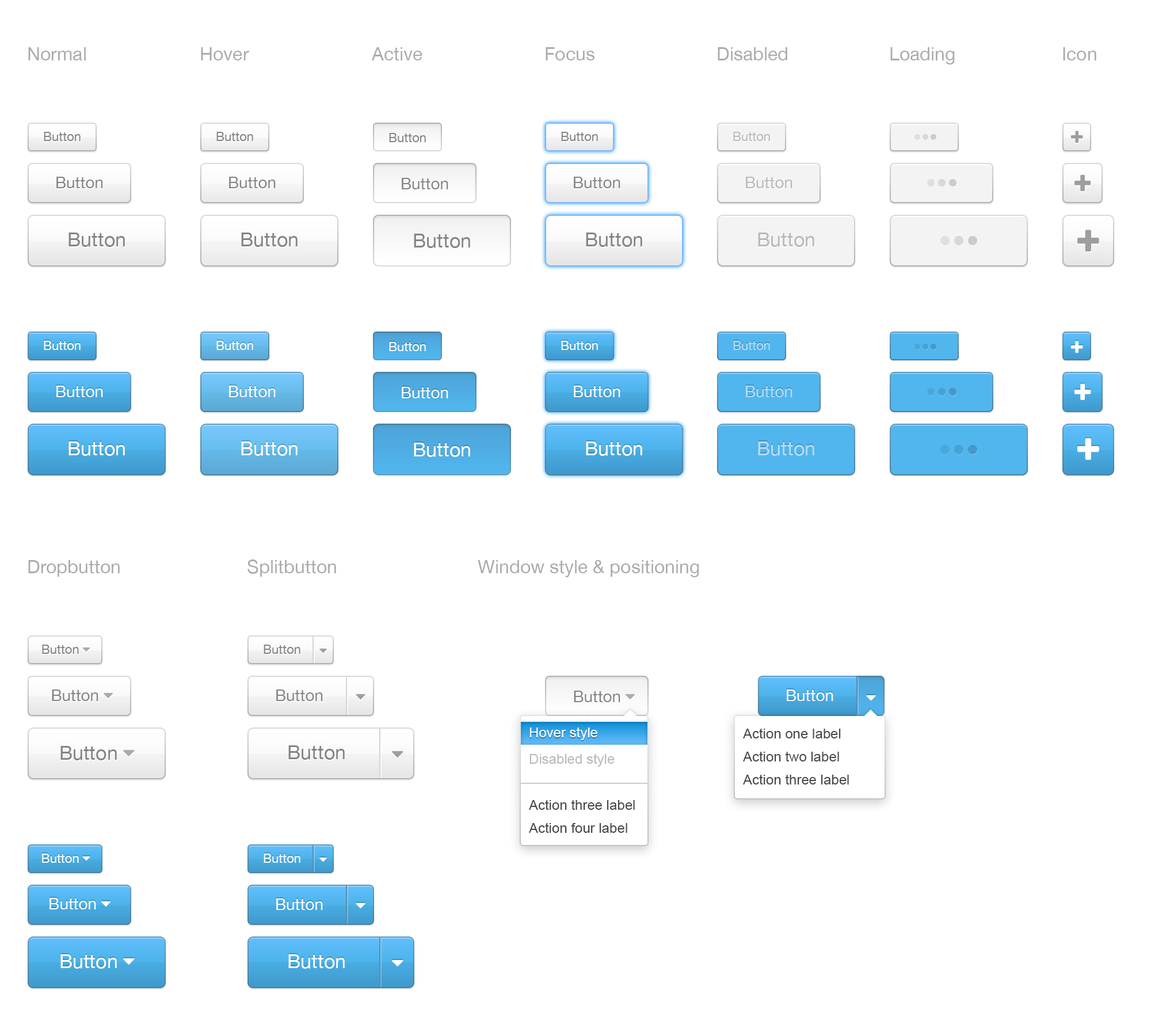
<style>
.page{position:relative;width:1151px;height:1036px;background:#ffffff}
.page>*{position:absolute;margin:0}
.t1{font:18.4px "HelveticaNeue";color:#ababab}
.t2{font:12.7px "HelveticaNeue";color:#848484}
.t3{font:12.7px "HelveticaNeue";color:#b9b9b9}
.t4{font:16.1px "HelveticaNeue";color:#848484}
.t5{font:16.1px "HelveticaNeue";color:#b9b9b9}
.t6{font:19.6px "HelveticaNeue";color:#848484}
.t7{font:19.6px "HelveticaNeue";color:#b9b9b9}
.t8{font:12.7px "HelveticaNeue";color:#ffffff}
.t9{font:12.7px "HelveticaNeue";color:#b6ddf7}
.t10{font:16.1px "HelveticaNeue";color:#ffffff}
.t11{font:16.1px "HelveticaNeue";color:#b6ddf7}
.t12{font:19.6px "HelveticaNeue";color:#ffffff}
.t13{font:19.6px "HelveticaNeue";color:#b6ddf7}
.t14{font:13.8px "ArialMT";color:#ffffff}
.t15{font:13.8px/23px "ArialMT";color:#474747}
.t16{font:13.8px/23px "ArialMT";color:#b9b9b9}
</style>
<div class="page">
<p class="t1" style="left:28px;top:47px;width:58px;height:13px">Normal</p>
<p class="t1" style="left:201px;top:47px;width:48px;height:13px">Hover</p>
<p class="t1" style="left:371px;top:47px;width:51px;height:13px">Active</p>
<p class="t1" style="left:546px;top:47px;width:49px;height:13px">Focus</p>
<p class="t1" style="left:718px;top:47px;width:69px;height:13px">Disabled</p>
<p class="t1" style="left:890px;top:47px;width:65px;height:17px">Loading</p>
<p class="t1" style="left:1063px;top:47px;width:33px;height:13px">Icon</p>
<p class="t2" style="left:44px;top:132px;width:37px;height:9px">Button</p>
<p class="t2" style="left:216px;top:132px;width:37px;height:9px">Button</p>
<p class="t2" style="left:389px;top:133px;width:37px;height:9px">Button</p>
<p class="t2" style="left:561px;top:132px;width:37px;height:9px">Button</p>
<p class="t3" style="left:733px;top:132px;width:37px;height:9px">Button</p>
<p class="t4" style="left:56px;top:177px;width:47px;height:11px">Button</p>
<p class="t4" style="left:229px;top:177px;width:47px;height:11px">Button</p>
<p class="t4" style="left:402px;top:178px;width:46px;height:11px">Button</p>
<p class="t4" style="left:574px;top:177px;width:46px;height:11px">Button</p>
<p class="t5" style="left:746px;top:177px;width:47px;height:11px">Button</p>
<p class="t6" style="left:68px;top:233px;width:57px;height:14px">Button</p>
<p class="t6" style="left:241px;top:233px;width:57px;height:14px">Button</p>
<p class="t6" style="left:414px;top:234px;width:56px;height:14px">Button</p>
<p class="t6" style="left:586px;top:233px;width:56px;height:14px">Button</p>
<p class="t7" style="left:758px;top:233px;width:56px;height:14px">Button</p>
<p class="t8" style="left:44px;top:341px;width:37px;height:9px">Button</p>
<p class="t8" style="left:216px;top:341px;width:37px;height:9px">Button</p>
<p class="t8" style="left:389px;top:342px;width:37px;height:9px">Button</p>
<p class="t8" style="left:561px;top:341px;width:37px;height:9px">Button</p>
<p class="t9" style="left:733px;top:341px;width:37px;height:9px">Button</p>
<p class="t10" style="left:56px;top:386px;width:47px;height:11px">Button</p>
<p class="t10" style="left:229px;top:386px;width:47px;height:11px">Button</p>
<p class="t10" style="left:402px;top:387px;width:46px;height:11px">Button</p>
<p class="t10" style="left:574px;top:386px;width:46px;height:11px">Button</p>
<p class="t11" style="left:746px;top:386px;width:47px;height:11px">Button</p>
<p class="t12" style="left:68px;top:441px;width:57px;height:15px">Button</p>
<p class="t12" style="left:241px;top:441px;width:57px;height:15px">Button</p>
<p class="t12" style="left:414px;top:443px;width:56px;height:14px">Button</p>
<p class="t12" style="left:586px;top:441px;width:56px;height:15px">Button</p>
<p class="t13" style="left:758px;top:441px;width:56px;height:15px">Button</p>
<p class="t1" style="left:28px;top:560px;width:92px;height:17px">Dropbutton</p>
<p class="t1" style="left:247px;top:559px;width:89px;height:18px">Splitbutton</p>
<p class="t1" style="left:478px;top:560px;width:221px;height:17px">Window style &amp; positioning</p>
<p class="t2" style="left:264px;top:645px;width:36px;height:9px">Button</p>
<p class="t4" style="left:276px;top:689px;width:47px;height:12px">Button</p>
<p class="t10" style="left:787px;top:689px;width:46px;height:12px">Button</p>
<p class="t14" style="left:529px;top:727px;width:68px;height:13px">Hover style</p>
<p class="t15" style="left:743px;top:728px;width:106px;height:56px">Action one label<br>Action two label<br>Action three label</p>
<p class="t6" style="left:288px;top:745px;width:57px;height:15px">Button</p>
<p class="t15" style="left:529px;top:753px;width:106px;height:80px"><span class="t16">Disabled style<br></span><br>Action three label<br>Action four label</p>
<p class="t8" style="left:264px;top:854px;width:36px;height:9px">Button</p>
<p class="t10" style="left:276px;top:898px;width:47px;height:12px">Button</p>
<p class="t12" style="left:288px;top:954px;width:57px;height:15px">Button</p>
</div>
